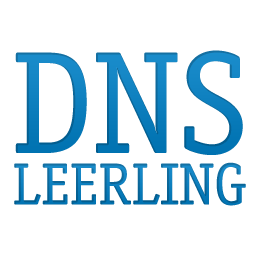
<style>
.page{position:relative;width:256px;height:256px;background:#ffffff}
.page>*{position:absolute;margin:0}
.t1{font:146.4px "OfficinaSerifStd-Book";color:#007fc5}
.t2{font:59.6px "OfficinaSerifStd-Book"}
</style>
<div class="page">
<p class="t1" style="left:15px;top:50px;width:228px;height:105px">DNS</p>
<p class="t2" style="left:14px;top:162px;width:232px;height:44px">LEERLING</p>
</div>
